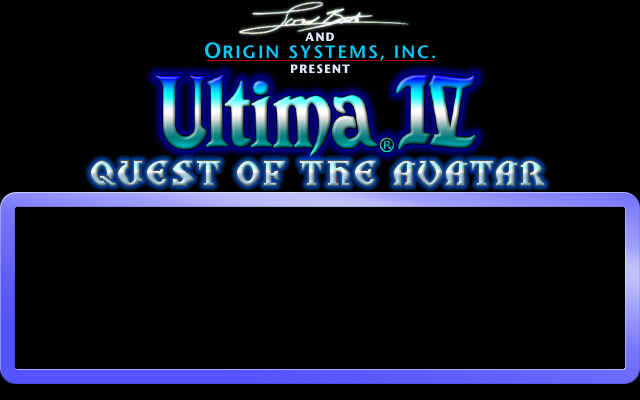
<style>
.page{position:relative;width:640px;height:400px;background:#000000}
.page>*{position:absolute;margin:0}
.t1{font:12px "StoneSans-Bold";letter-spacing:0.1em;color:#e3e8ff;text-transform:uppercase}
.t2{font:18px "StoneSans-Semibold";letter-spacing:0.1em;color:#00ceff;text-transform:uppercase}
.t3{font:22px "StoneSans-Semibold";letter-spacing:0.1em;color:#00ceff;text-transform:uppercase}
.t4{font:32px "UltimapLetters";letter-spacing:-0.1em}
</style>
<div class="page">
<p class="t1" style="left:305px;top:32px;width:29px;height:9px">and</p>
<p class="t2" style="left:205px;top:42px;width:230px;height:19px"><span class="t3">O</span>rigin systems, inc.</p>
<p class="t1" style="left:291px;top:64px;width:59px;height:10px">Present</p>
<p class="t4" style="left:86px;top:157px;width:462px;height:32px">quest of the avatar</p>
</div>
